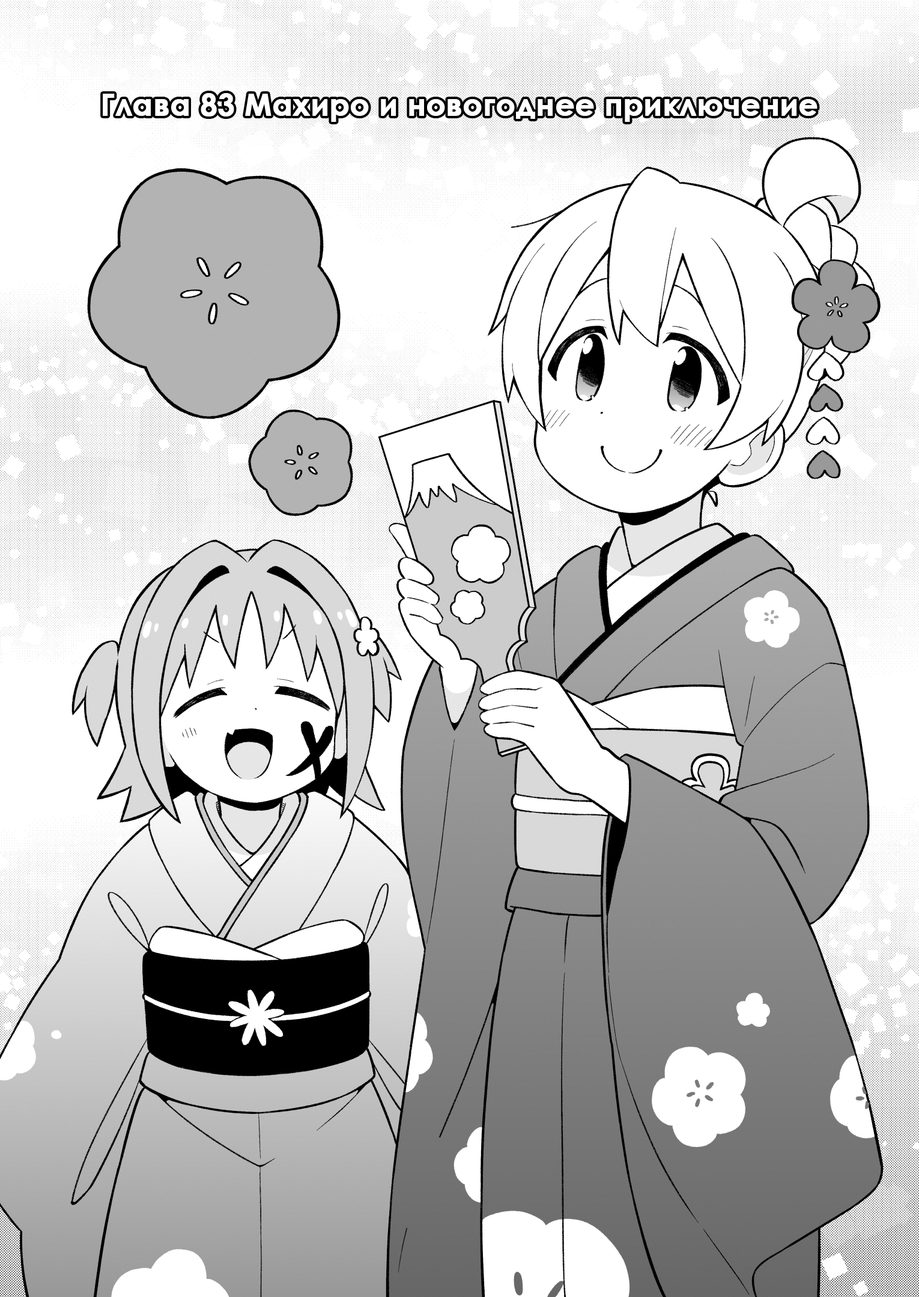
<style>
.page{position:relative;width:919px;height:1297px;background:#ffffff}
.page>*{position:absolute;margin:0}
.t1{font:30px "CenturyGothic-Bold";color:#ffffff;font-weight:bold}
</style>
<div class="page">
<p class="t1" style="left:103px;top:93px;width:715px;height:29px">Глава 83 Махиро и новогоднее приключение</p>
</div>
